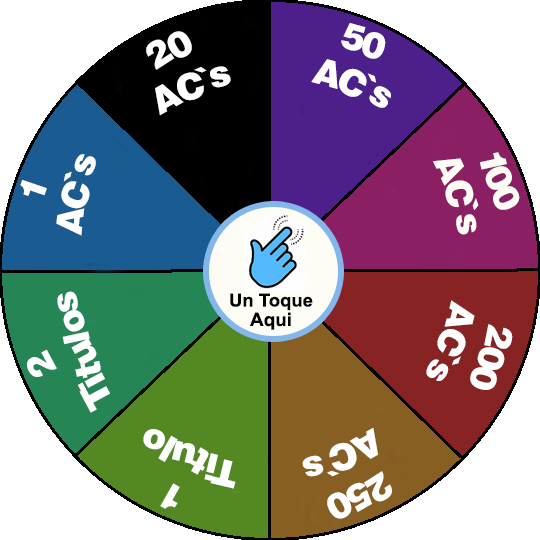
<style>
.page{position:relative;width:540px;height:540px;background:#ffffff}
.page>*{position:absolute;margin:0}
.t1{font:36px "Soopafresh";color:#ffffff}
.t2{font:35.9px "Soopafresh";color:#ffffff}
.t3{font:35.9px "Soopafresh";color:#fdfdf6}
</style>
<div class="page">
<p class="t1" style="left:311px;top:23px;width:80px;height:85px;text-align:center;rotate:21deg">50<br> AC`s</p>
<p class="t2" style="left:146px;top:31px;width:85px;height:85px;text-align:center;rotate:-24deg">20<br> AC`s</p>
<p class="t1" style="left:20px;top:154px;width:76px;height:82px;text-align:center;rotate:-78deg">1 <br>AC`s</p>
<p class="t3" style="left:433px;top:152px;width:87px;height:83px;text-align:center;rotate:71deg">100<br>AC`s</p>
<p class="t1" style="left:27px;top:291px;width:83px;height:122px;text-align:center;rotate:-109deg">2<br>Titulos</p>
<p class="t1" style="left:426px;top:300px;width:87px;height:90px;text-align:center;rotate:110deg">200<br>AC`s</p>
<p class="t1" style="left:143px;top:429px;width:93px;height:80px;text-align:center;rotate:-157deg">1<br>Titulo</p>
<p class="t1" style="left:302px;top:427px;width:90px;height:92px;text-align:center;rotate:156deg">250<br>AC`s</p>
</div>
